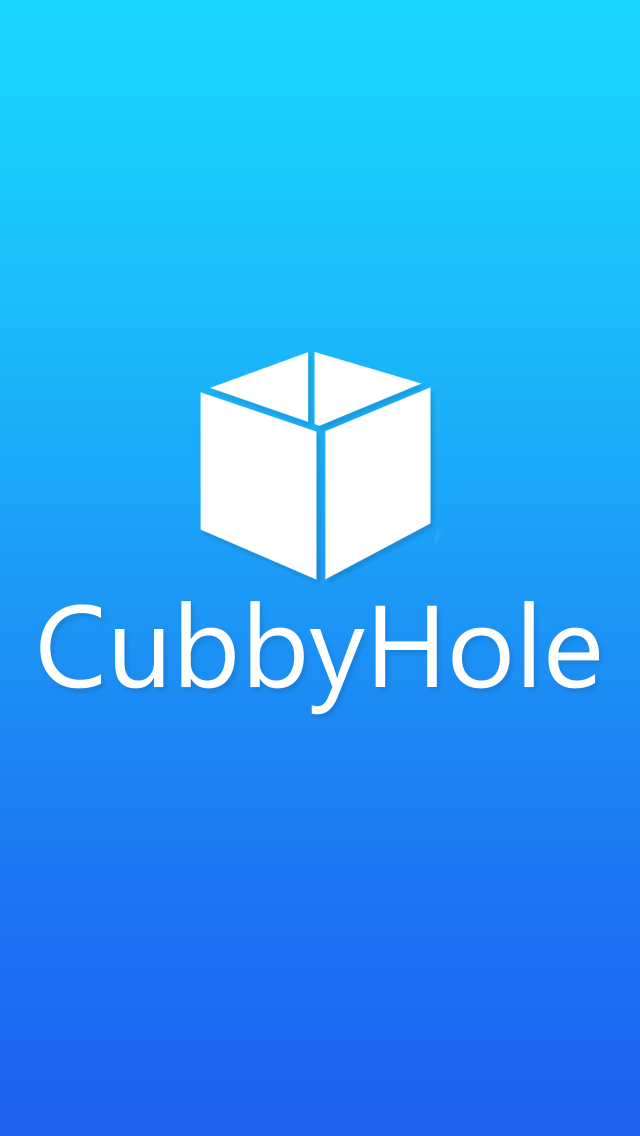
<style>
.page{position:relative;width:640px;height:1136px}
.page>*{position:absolute;margin:0}
.t1{font:115.9px "Gadugi";color:#ffffff}
</style>
<div class="page">
<p class="t1" style="left:40px;top:601px;width:560px;height:114px">CubbyHole</p>
</div>
